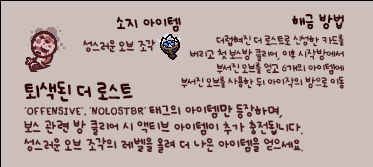
<style>
.page{position:relative;width:373px;height:167px;background:#ccbebb}
.page>*{position:absolute;margin:0}
.t1{font:12px "UhBeeSe_hyunBold";color:#2e0304}
.t2{font:12px "UhBeeSe_hyunBold";letter-spacing:-0.1em;color:#2e0304}
.t3{font:12px "UhBeeSe_hyunBold";letter-spacing:-0.15em;color:#2e0304}
.t4{font:10px "UhBeeSe_hyunBold";letter-spacing:-0.05em;color:#4b1c1c}
.t5{font:10px "UhBeeSe_hyunBold";letter-spacing:-0.2em;color:#4b1c1c}
.t6{font:10px "UhBeeSe_hyunBold";color:#4b1c1c}
.t7{font:9px/14px "UhBeeSe_hyunBold";letter-spacing:-0.075em;color:#4b1c1c}
.t8{font:9px/14px "Font_soulsV2_Title-Regular";letter-spacing:-0.075em;color:#4b1c1c}
.t9{font:11px/17px "UhBeeSe_hyunBold";letter-spacing:-0.025em;color:#4b1c1c}
.t10{font:15.2px/22px "UhBeeSe_hyunBold";letter-spacing:-0.1em;color:#2e0304;scale:1.05 1}
.t11{font:16px/22px "UhBeeSe_hyunBold";letter-spacing:-0.05em;color:#2e0304}
.t12{font:16px/22px "UhBeeSe_hyunBold";letter-spacing:-0.025em;color:#2e0304}
.t13{font:11px/16px "Font_soulsV2_Title-Regular";letter-spacing:-0.025em;color:#4b1c1c}
.t14{font:11px/16px "UhBeeSe_hyunBold";letter-spacing:-0.025em;color:#4b1c1c}
.t15{font:11px/16px "UhBeeSe_hyunBold";letter-spacing:-0.025em;color:#4b1c1c;font-weight:bold}
.t16{font:11px/16px "UhBeeSe_hyunBold";letter-spacing:-0.1em;color:#4b1c1c}
.t17{font:11px/17px "UhBeeSe_hyunBold";letter-spacing:-0.15em;color:#4b1c1c}
.t18{font:11px/17px "UhBeeSe_hyunBold";color:#4b1c1c}
</style>
<div class="page">
<p class="t1" style="left:116px;top:16px;width:65px;height:16px"><span class="t2">소</span>지 아이템</p>
<p class="t1" style="left:291px;top:13px;width:53px;height:17px">해금 방<span class="t3">법</span></p>
<p class="t4" style="left:83px;top:39px;width:73px;height:14px">성스러운 오브 <span class="t5">조</span><span class="t6">각</span></p>
<p class="t7" style="left:181px;top:34px;width:163px;height:55px;text-align:right">더럽혀진 더 로스트로 신성한 카드를<br>버리고 첫 보스방 클리어, 이후 시작방에서<br>부서진 오브를 얻고 <span class="t8">6</span>개의 아이템에<br>부서진 오브를 사용한 뒤 아이작의 방으로 이동</p>
<p class="t9" style="left:24px;top:81px;width:279px;height:73px"><span class="t10">토</span><span class="t11">ㅣ</span><span class="t12">색</span><span class="t11">된 더 로스트<br></span><span class="t13">‘offensive’, ‘nolostbr’ </span><span class="t14">태그의 아이템</span><span class="t15">만</span><span class="t16"> 등장</span><span class="t14">하며,<br></span>보스 관련 방 클리어 시 액티브 아이템이 추가 충전됩니다.<br>성스러운 오브 <span class="t17">조</span>각의 레<span class="t18">벨</span>을 올려 더 나은 아이템을 얻으세요.</p>
</div>
